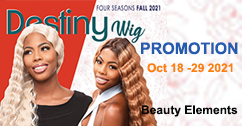
<style>
.page{position:relative;width:242px;height:126px}
.page>*{position:absolute;margin:0}
.t1{font:16px "Arial-BoldMT";color:#225baf}
.t2{font:12px "Arial-BoldMT";color:#fc8108}
.t3{font:12px "Arial-BoldMT";color:#080808}
</style>
<div class="page">
<p class="t1" style="left:141px;top:42px;width:97px;height:13px">PROMOTION</p>
<p class="t2" style="left:147px;top:63px;width:86px;height:10px">Oct 18 -29 2021</p>
<p class="t3" style="left:141px;top:105px;width:97px;height:12px">Beauty Elements</p>
</div>
